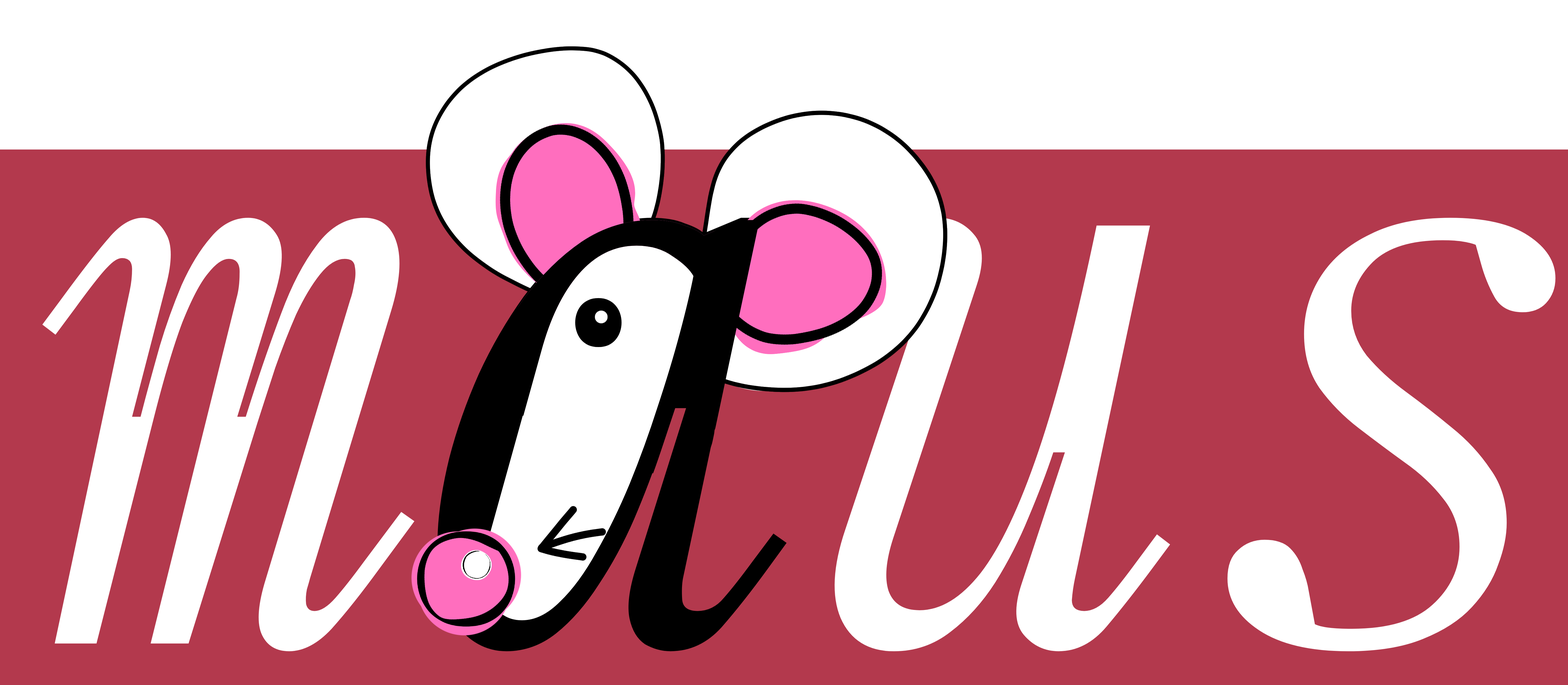
<style>
.page{position:relative;width:1568px;height:685px;background:#b3394d}
.page>*{position:absolute;margin:0}
.t1{font:773.5px "XanhMono-Italic";color:#ffffff}
.t2{font:773.5px "XanhMono-Italic";color:#000000}
</style>
<div class="page">
<p class="t1" style="left:42px;top:218px;width:1514px;height:433px">m<span class="t2">a</span>us</p>
</div>
